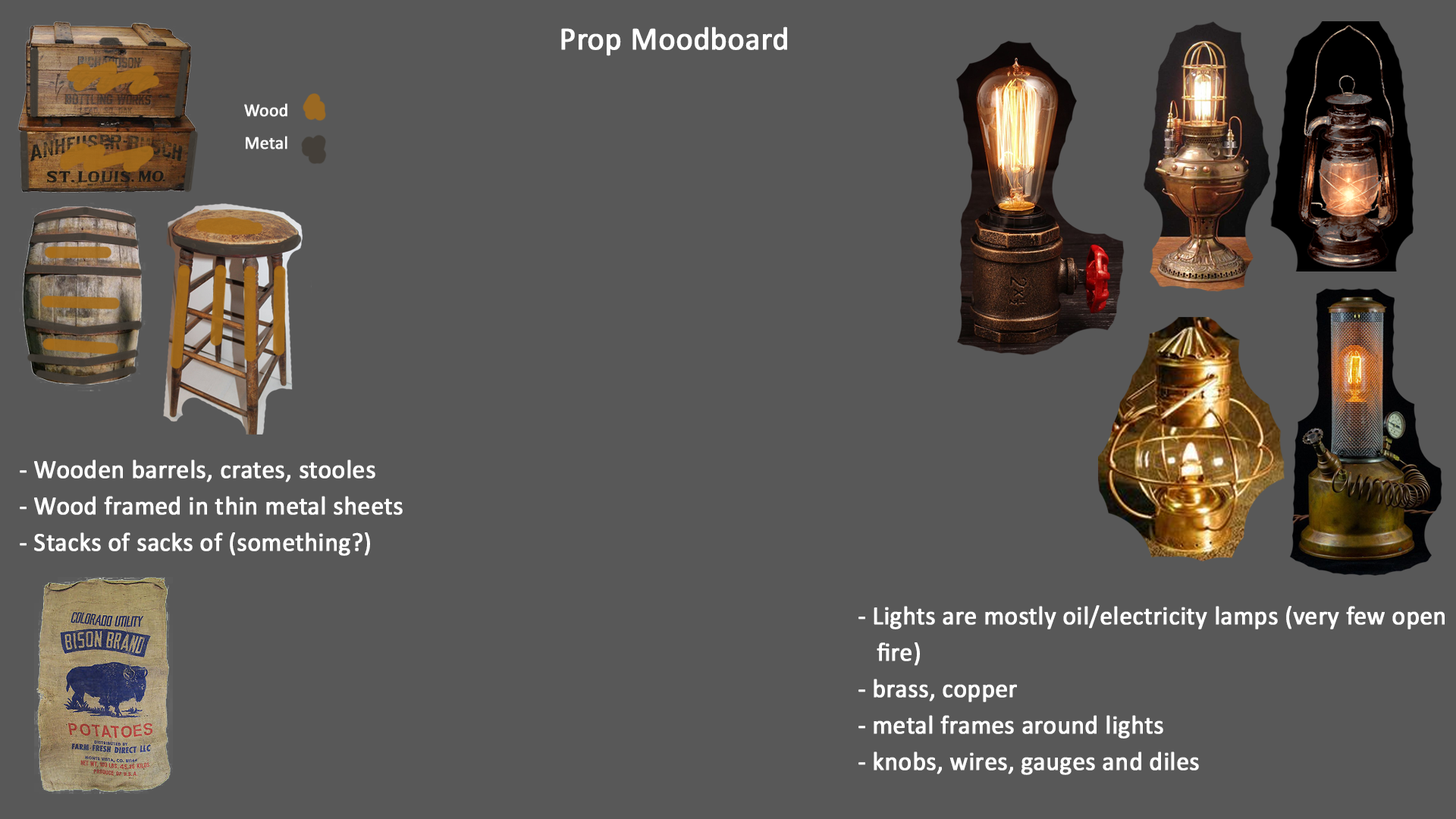
<style>
.page{position:relative;width:1456px;height:819px;background:#585858}
.page>*{position:absolute;margin:0}
.t1{font:32.6px "Calibri";color:#ffffff;font-weight:bold;scale:0.97 1}
.t2{font:18.2px "Calibri";color:#ffffff;font-weight:bold;scale:0.97 1}
.t3{font:26.1px "Calibri";color:#ffffff;font-weight:bold;scale:0.97 1}
</style>
<div class="page">
<p class="t1" style="left:561px;top:27px;width:226px;height:29px">Prop Moodboard</p>
<p class="t2" style="left:244px;top:103px;width:43px;height:14px">Wood</p>
<p class="t2" style="left:246px;top:136px;width:41px;height:13px">Metal</p>
<p class="t3" style="left:20px;top:460px;width:383px;height:96px">- Wooden barrels, crates, stooles<br>- Wood framed in thin metal sheets<br>- Stacks of sacks of (something?)</p>
<p class="t3" style="left:858px;top:605px;width:587px;height:170px">- Lights are mostly oil/electricity lamps (very few open   <br>   fire)  <br>- brass, copper<br>- metal frames around lights<br>- knobs, wires, gauges and diles</p>
</div>
